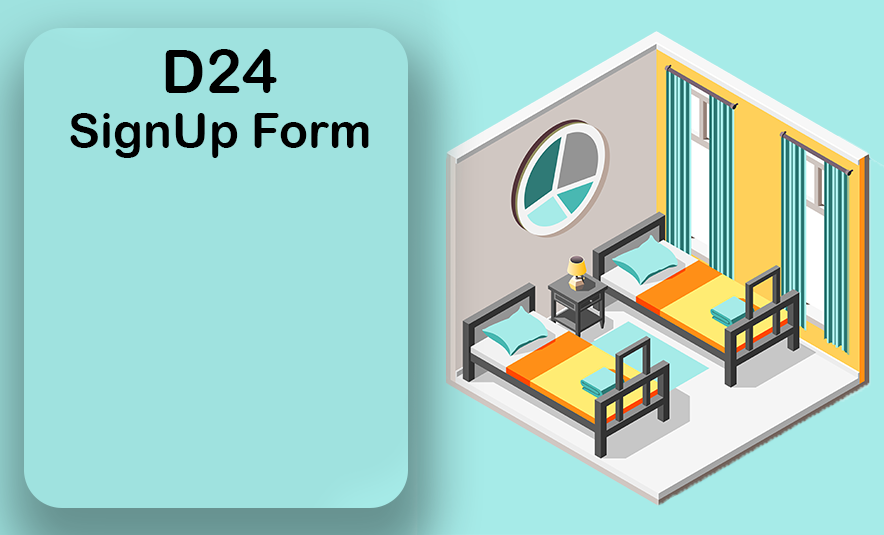
<style>
.page{position:relative;width:884px;height:535px;background:#9fe2df}
.page>*{position:absolute;margin:0}
.t1{font:61.1px "ArialRoundedMTBold";color:#000000}
.t2{font:48.9px "ArialRoundedMTBold";color:#000000}
</style>
<div class="page">
<p class="t1" style="left:165px;top:49px;width:112px;height:44px">D24</p>
<p class="t2" style="left:70px;top:113px;width:299px;height:45px">SignUp Form</p>
</div>
